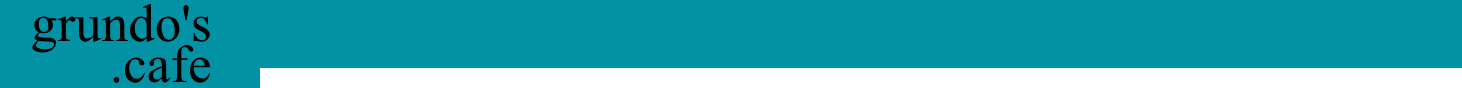
<style>
.page{position:relative;width:1462px;height:88px;background:#0193a5}
.page>*{position:absolute;margin:0}
.t1{font:53.2px "TimesNewRomanPSMT";color:#000000}
</style>
<div class="page">
<p class="t1" style="left:32px;top:4px;width:179px;height:79px;text-align:right">grundo's<br>.cafe</p>
</div>
